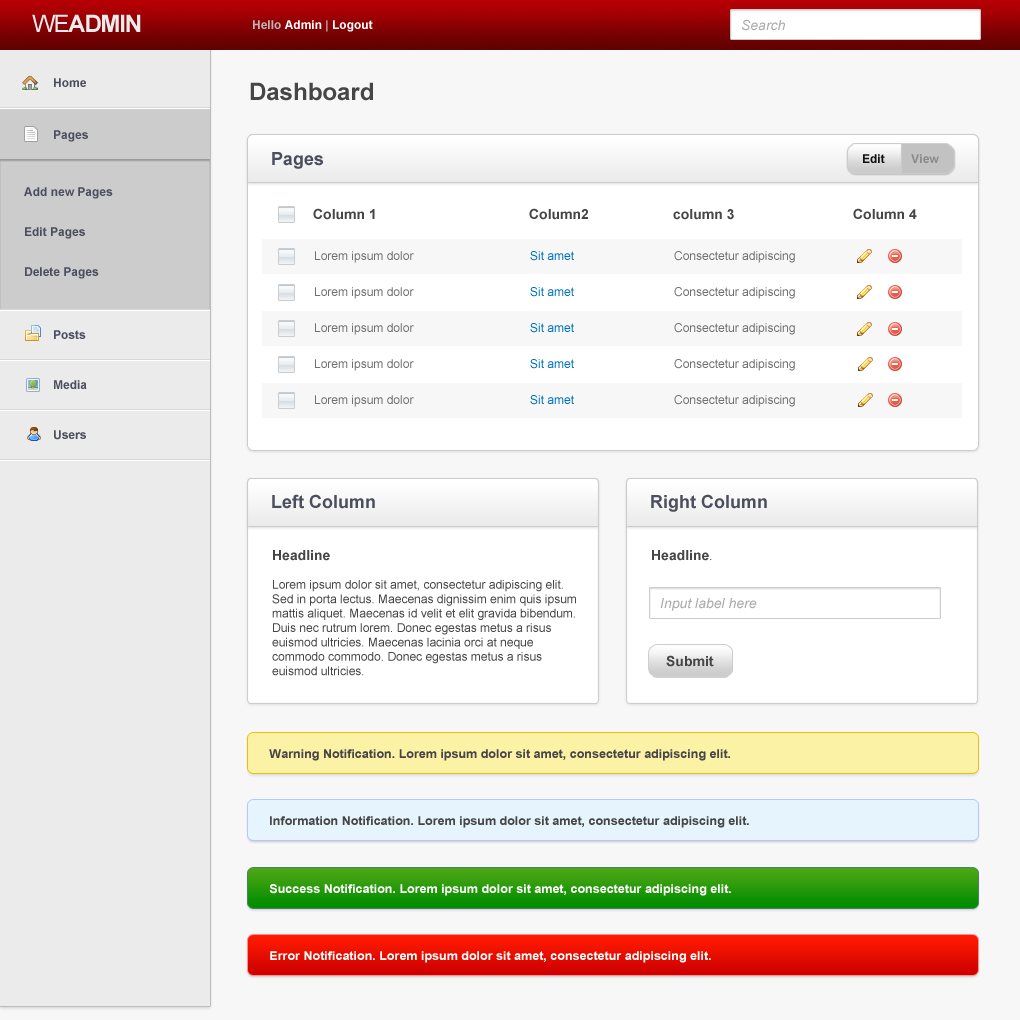
<style>
.page{position:relative;width:1020px;height:1020px;background:#f7f7f7}
.page>*{position:absolute;margin:0}
.t1{font:24px "Arial-BoldMT";letter-spacing:-0.05em;color:#ebebeb}
.t2{font:24px "ArialMT";letter-spacing:-0.05em;color:#ebebeb}
.t3{font:12px "Arial-BoldMT";color:#ffffff}
.t4{font:12px "Arial-BoldMT";color:#b7b7b7}
.t5{font:14px "Arial-ItalicMT";color:#acacac}
.t6{font:12px "Arial-BoldMT";color:#4b4f5d}
.t7{font:24px "Arial-BoldMT";color:#464646}
.t8{font:18px "Arial-BoldMT";color:#4b4f5d}
.t9{font:12px "Arial-BoldMT";color:#111111}
.t10{font:12px "Arial-BoldMT";color:#898989}
.t11{font:12px/40px "Arial-BoldMT";color:#4b4f5d}
.t12{font:14px "Arial-BoldMT";color:#464646}
.t13{font:12px "ArialMT";color:#707070}
.t14{font:12px "ArialMT";color:#0072bc}
.t15{font:12px "ArialMT";color:#464646}
.t16{font:12px "Helvetica";color:#464646}
.t17{font:12px "Arial-BoldMT";color:#464646;scale:1.04 1}
.t18{font:12px "Arial-BoldMT";color:#ffffff;scale:1.04 1}
</style>
<div class="page">
<p class="t1" style="left:32px;top:14px;width:109px;height:18px"><span class="t2">WE</span>ADMIN</p>
<p class="t3" style="left:253px;top:20px;width:120px;height:12px"><span class="t4">Hello</span> Admin <span class="t4">|</span> Logout</p>
<p class="t5" style="left:742px;top:19px;width:43px;height:12px">Search</p>
<p class="t6" style="left:54px;top:78px;width:32px;height:9px">Home</p>
<p class="t7" style="left:250px;top:82px;width:123px;height:19px">Dashboard</p>
<p class="t6" style="left:54px;top:130px;width:34px;height:12px">Pages</p>
<p class="t8" style="left:272px;top:152px;width:51px;height:17px">Pages</p>
<p class="t9" style="left:863px;top:154px;width:76px;height:9px">Edit        <span class="t10">View</span></p>
<p class="t11" style="left:24px;top:187px;width:89px;height:92px">Add new Pages<br>Edit Pages<br>Delete Pages</p>
<p class="t12" style="left:313px;top:208px;width:604px;height:12px">Column 1     Column2   column 3    Column 4</p>
<p class="t13" style="left:315px;top:251px;width:480px;height:12px">Lorem ipsum dolor    <span class="t14">Sit amet</span>   Consectetur adipiscing</p>
<p class="t13" style="left:315px;top:287px;width:480px;height:12px">Lorem ipsum dolor    <span class="t14">Sit amet</span>   Consectetur adipiscing</p>
<p class="t13" style="left:315px;top:323px;width:480px;height:12px">Lorem ipsum dolor    <span class="t14">Sit amet</span>   Consectetur adipiscing</p>
<p class="t6" style="left:54px;top:330px;width:32px;height:9px">Posts</p>
<p class="t13" style="left:315px;top:359px;width:480px;height:12px">Lorem ipsum dolor    <span class="t14">Sit amet</span>   Consectetur adipiscing</p>
<p class="t6" style="left:54px;top:380px;width:33px;height:9px">Media</p>
<p class="t13" style="left:315px;top:395px;width:480px;height:12px">Lorem ipsum dolor    <span class="t14">Sit amet</span>   Consectetur adipiscing</p>
<p class="t6" style="left:54px;top:430px;width:32px;height:10px">Users</p>
<p class="t8" style="left:272px;top:494px;width:103px;height:15px">Left Column</p>
<p class="t8" style="left:651px;top:494px;width:116px;height:18px">Right Column</p>
<p class="t15" style="left:272px;top:550px;width:304px;height:126px"><span class="t12">Headline<br><br></span>Lorem ipsum dolor sit amet, consectetur adipiscing elit. <br>Sed in porta lectus. Maecenas dignissim enim quis ipsum <br>mattis aliquet. Maecenas id velit et elit gravida bibendum. <br>Duis nec rutrum lorem. Donec egestas metus a risus <br>euismod ultricies. Maecenas lacinia orci at neque <br>commodo commodo. Donec egestas metus a risus <br>euismod ultricies.</p>
<p class="t12" style="left:652px;top:550px;width:60px;height:11px">Headline<span class="t16">.</span></p>
<p class="t5" style="left:660px;top:598px;width:97px;height:13px">Input label here</p>
<p class="t12" style="left:666px;top:655px;width:48px;height:12px">Submit</p>
<p class="t17" style="left:269px;top:749px;width:461px;height:12px">Warning Notification. Lorem ipsum dolor sit amet, consectetur adipiscing elit.</p>
<p class="t17" style="left:270px;top:816px;width:479px;height:12px">Information Notification. Lorem ipsum dolor sit amet, consectetur adipiscing elit.</p>
<p class="t18" style="left:269px;top:884px;width:462px;height:12px">Success Notification. Lorem ipsum dolor sit amet, consectetur adipiscing elit.</p>
<p class="t18" style="left:270px;top:951px;width:441px;height:12px">Error Notification. Lorem ipsum dolor sit amet, consectetur adipiscing elit.</p>
</div>
